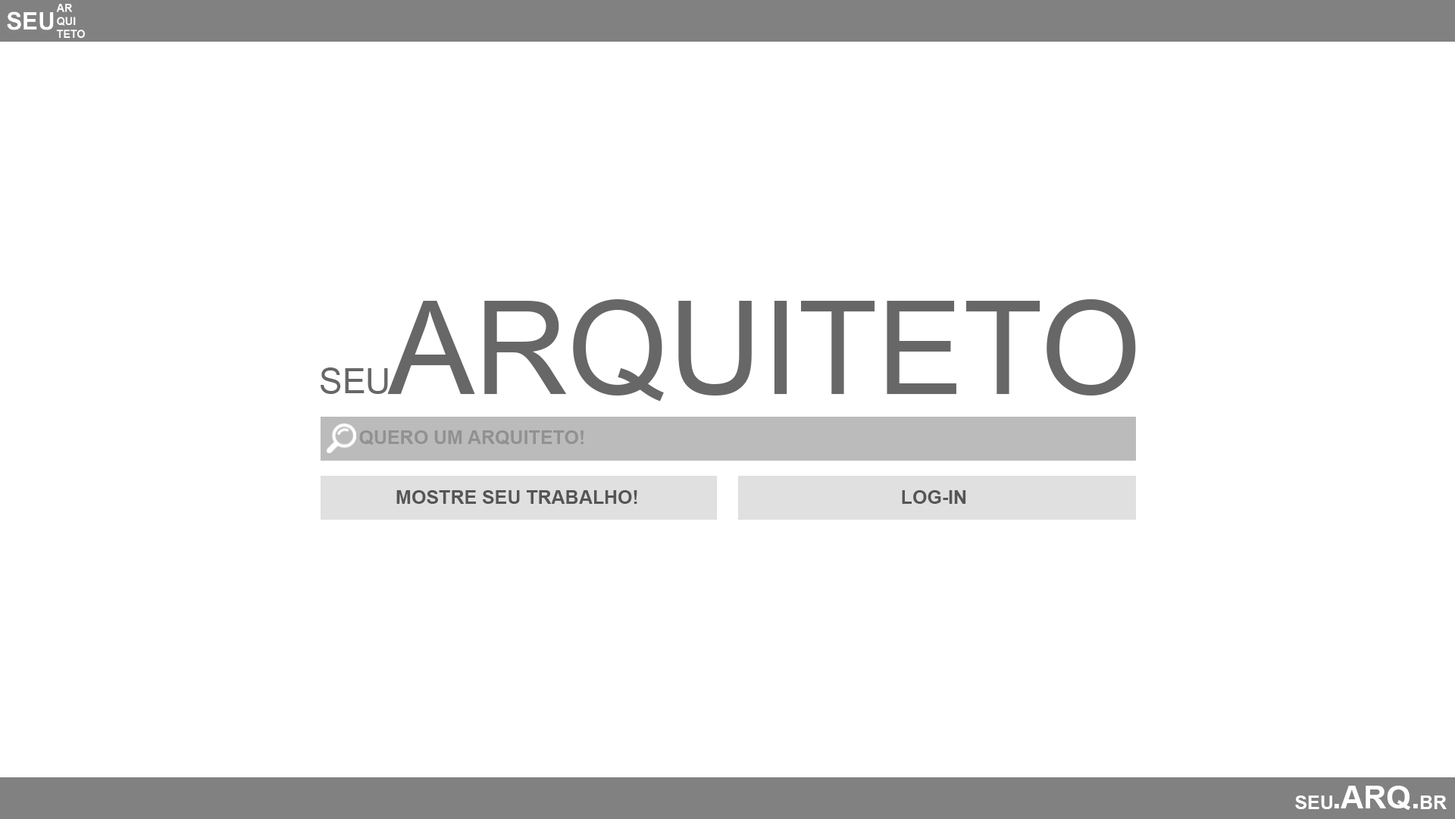
<style>
.page{position:relative;width:1455px;height:819px;background:#ffffff}
.page>*{position:absolute;margin:0}
.t1{font:18.9px "Arial-BoldMT";color:#919191}
.t2{font:18.9px "Arial-BoldMT";color:#555555}
.t3{font:18.9px "Arial-BoldMT";color:#ffffff}
.t4{font:31.6px "Arial-BoldMT";color:#ffffff}
</style>
<div class="page">
<p class="t1" style="left:359px;top:431px;width:225px;height:14px">QUERO UM ARQUITETO!</p>
<p class="t2" style="left:396px;top:490px;width:241px;height:14px">MOSTRE SEU TRABALHO!</p>
<p class="t2" style="left:902px;top:490px;width:64px;height:14px">LOG-IN</p>
<p class="t3" style="left:1295px;top:796px;width:38px;height:14px">SEU</p>
<p class="t4" style="left:1335px;top:786px;width:83px;height:24px">.ARQ.</p>
<p class="t3" style="left:1420px;top:796px;width:27px;height:14px">BR</p>
</div>
